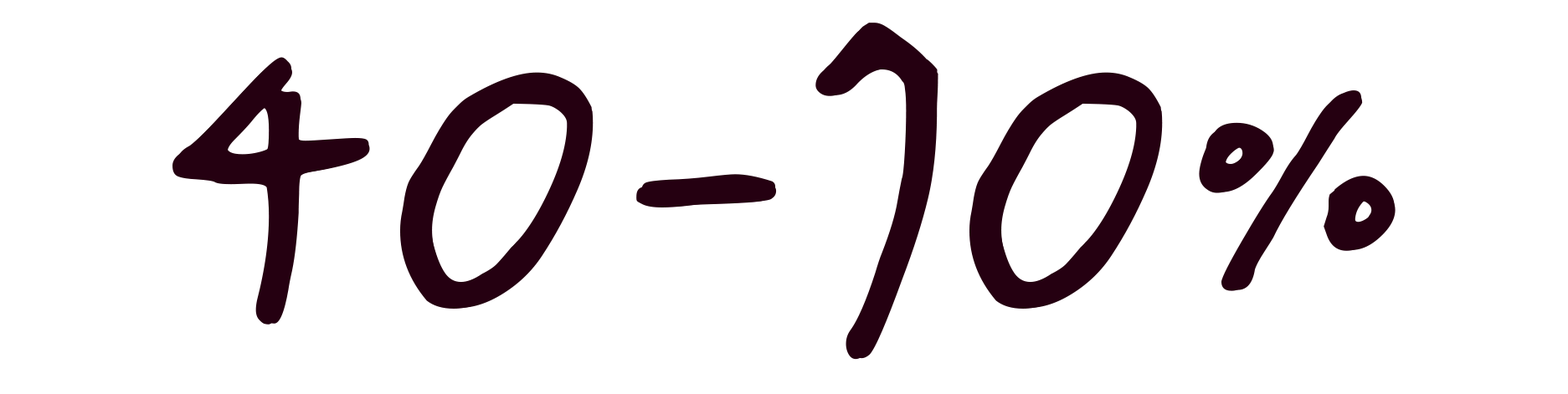
<style>
.page{position:relative;width:1568px;height:394px;background:#ffffff}
.page>*{position:absolute;margin:0}
.t1{font:554.6px "ChenYuluoyan-Thin-Monospaced";color:#250011;text-transform:uppercase}
</style>
<div class="page">
<p class="t1" style="left:172px;top:28px;width:1218px;height:332px">40-70%</p>
<p class="t1" style="left:177px;top:23px;width:1218px;height:332px">40-70%</p>
<p class="t1" style="left:178px;top:27px;width:1218px;height:332px">40-70%</p>
</div>
